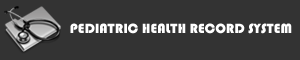
<style>
.page{position:relative;width:300px;height:60px;background:#333333}
.page>*{position:absolute;margin:0}
.t1{font:14px "Bauhaus93";color:#ffffff}
</style>
<div class="page">
<p class="t1" style="left:70px;top:23px;width:222px;height:11px">PEDIATRIC HEALTH RECORD SYSTEM</p>
</div>
